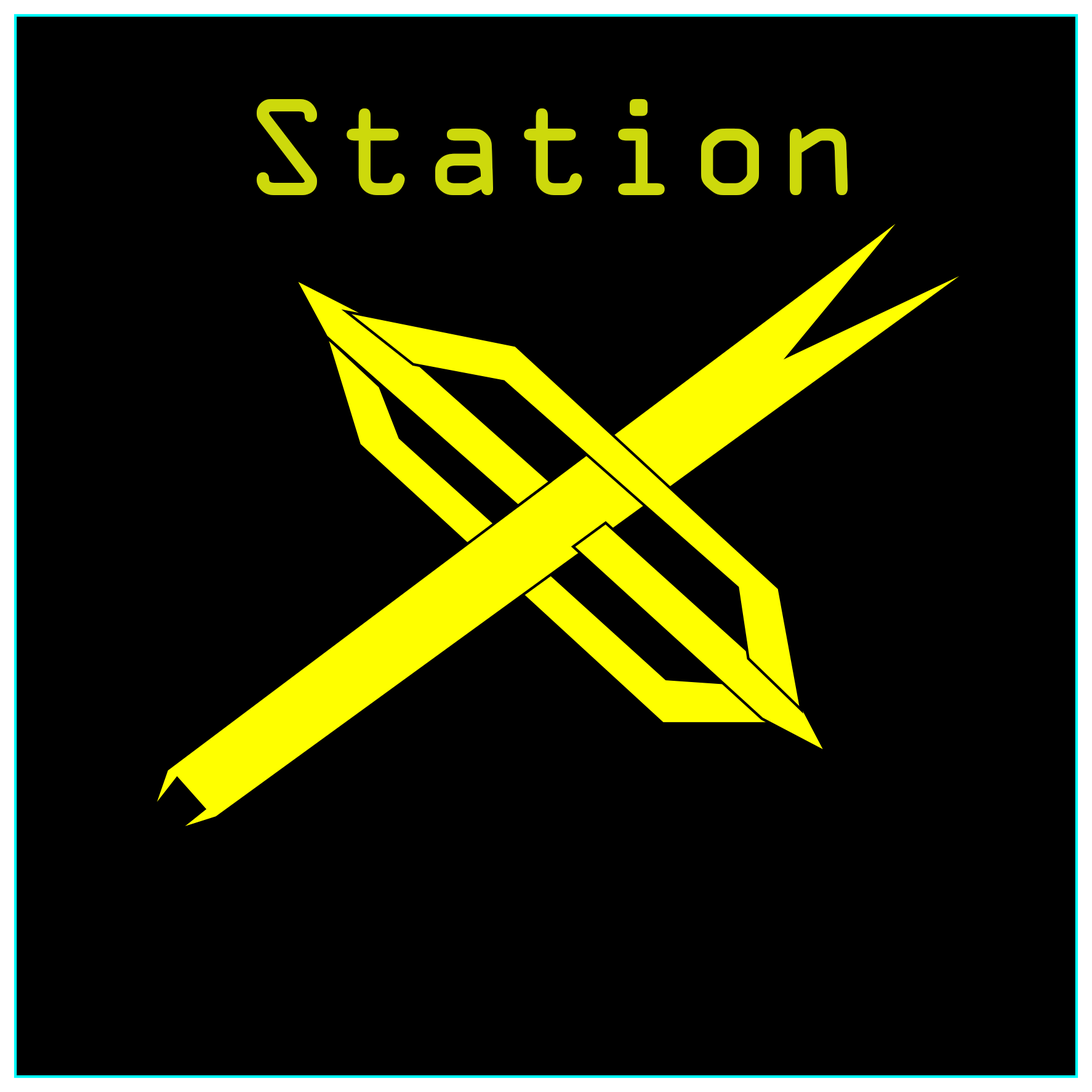
<style>
.page{position:relative;width:1092px;height:1092px;background:#000000}
.page>*{position:absolute;margin:0}
.t1{font:123.1px "OCRAStd";color:#cdd90c}
</style>
<div class="page">
<p class="t1" style="left:257px;top:98px;width:591px;height:97px">Station</p>
</div>
